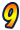
<style>
.page{position:relative;width:20px;height:30px;background:#ffffff}
.page>*{position:absolute;margin:0}
.t1{font:28px "Yikes"}
</style>
<div class="page">
<p class="t1" style="left:4px;top:4px;width:13px;height:23px">9</p>
</div>
